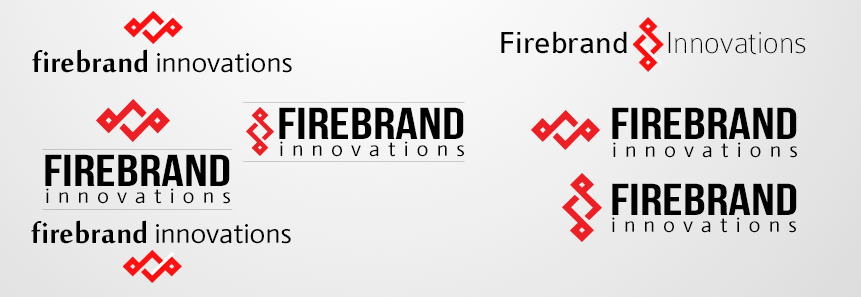
<style>
.page{position:relative;width:861px;height:297px}
.page>*{position:absolute;margin:0}
.t1{font:32.4px "Colaborate-Thin";color:#000000}
.t2{font:32.4px "Colaborate-Regular";color:#000000}
.t3{font:27.1px "Actor-Regular";letter-spacing:0.003em;color:#000000}
.t4{font:44px "MoolBoran";letter-spacing:0.003em;color:#000000}
.t5{font:44.7px "BebasNeue";color:#000000;scale:1.25 1}
.t6{font:7.2px "MoolBoran";letter-spacing:0.003em;font-variant:small-caps;scale:91.11 1}
.t7{font:20.9px "Actor-Regular";letter-spacing:0.403em;color:#000000}
</style>
<div class="page">
<p class="t1" style="left:501px;top:31px;width:305px;height:24px"><span class="t2">Firebrand</span>     Innovations</p>
<p class="t3" style="left:32px;top:49px;width:260px;height:24px"><span class="t4">firebrand </span>innovations</p>
<p class="t5" style="left:279px;top:107px;width:185px;height:32px">Firebrand</p>
<p class="t5" style="left:612px;top:107px;width:185px;height:32px">Firebrand</p>
<p class="t6" style="left:42px;top:149px;width:191px;height:1px">_</p>
<p class="t7" style="left:280px;top:141px;width:184px;height:16px">innovations</p>
<p class="t7" style="left:613px;top:142px;width:184px;height:16px">innovations</p>
<p class="t5" style="left:45px;top:154px;width:185px;height:32px">Firebrand</p>
<p class="t5" style="left:612px;top:183px;width:185px;height:32px">Firebrand</p>
<p class="t7" style="left:46px;top:188px;width:184px;height:16px">innovations</p>
<p class="t6" style="left:42px;top:209px;width:191px;height:1px">_</p>
<p class="t3" style="left:31px;top:220px;width:260px;height:24px"><span class="t4">firebrand </span>innovations</p>
<p class="t7" style="left:612px;top:217px;width:184px;height:16px">innovations</p>
</div>
